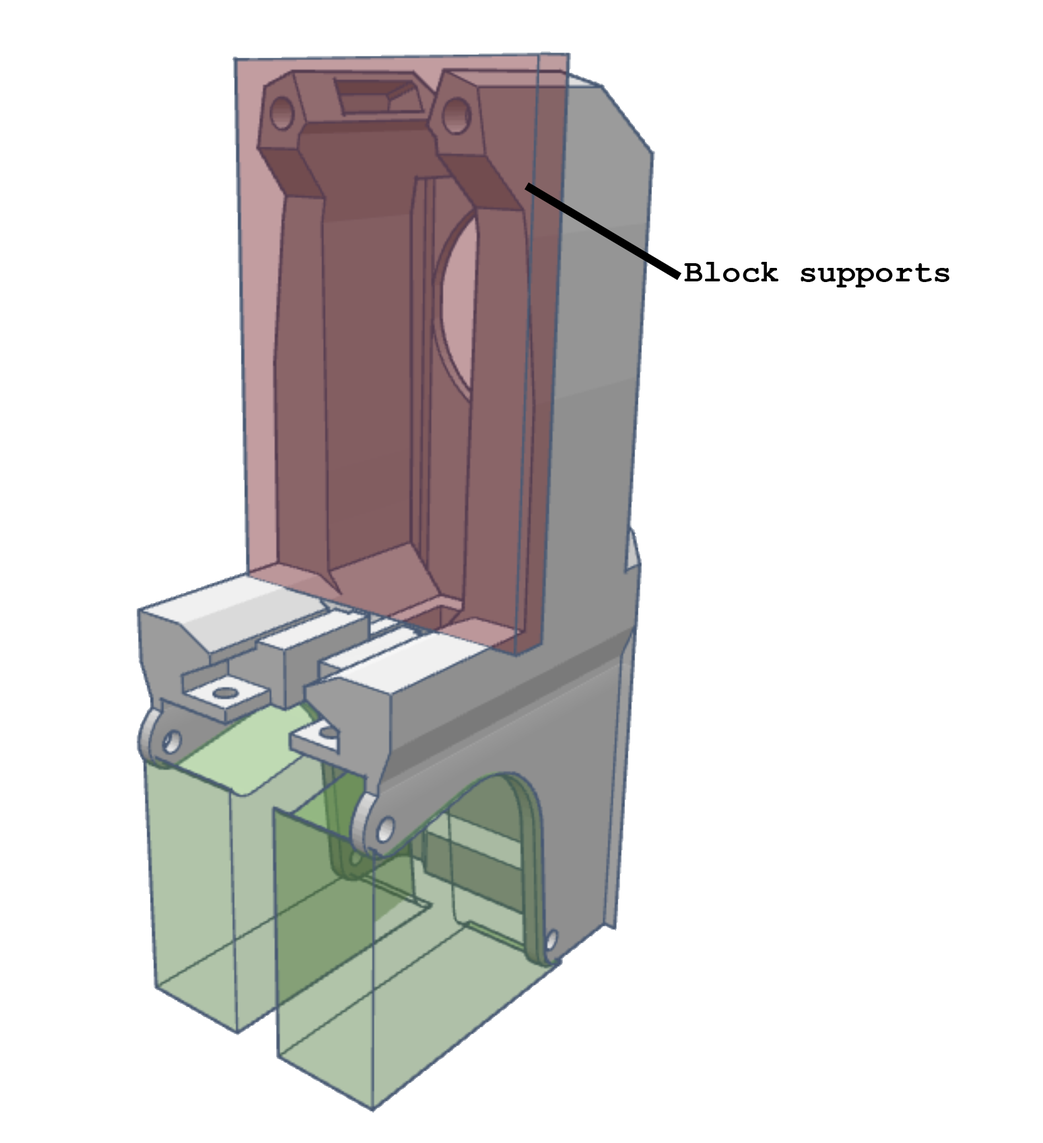
<style>
.page{position:relative;width:1043px;height:1143px;background:#ffffff}
.page>*{position:absolute;margin:0}
.t1{font:31.8px "CourierNewPS-BoldMT";color:#000000}
</style>
<div class="page">
<p class="t1" style="left:684px;top:262px;width:265px;height:26px">Block supports</p>
</div>
